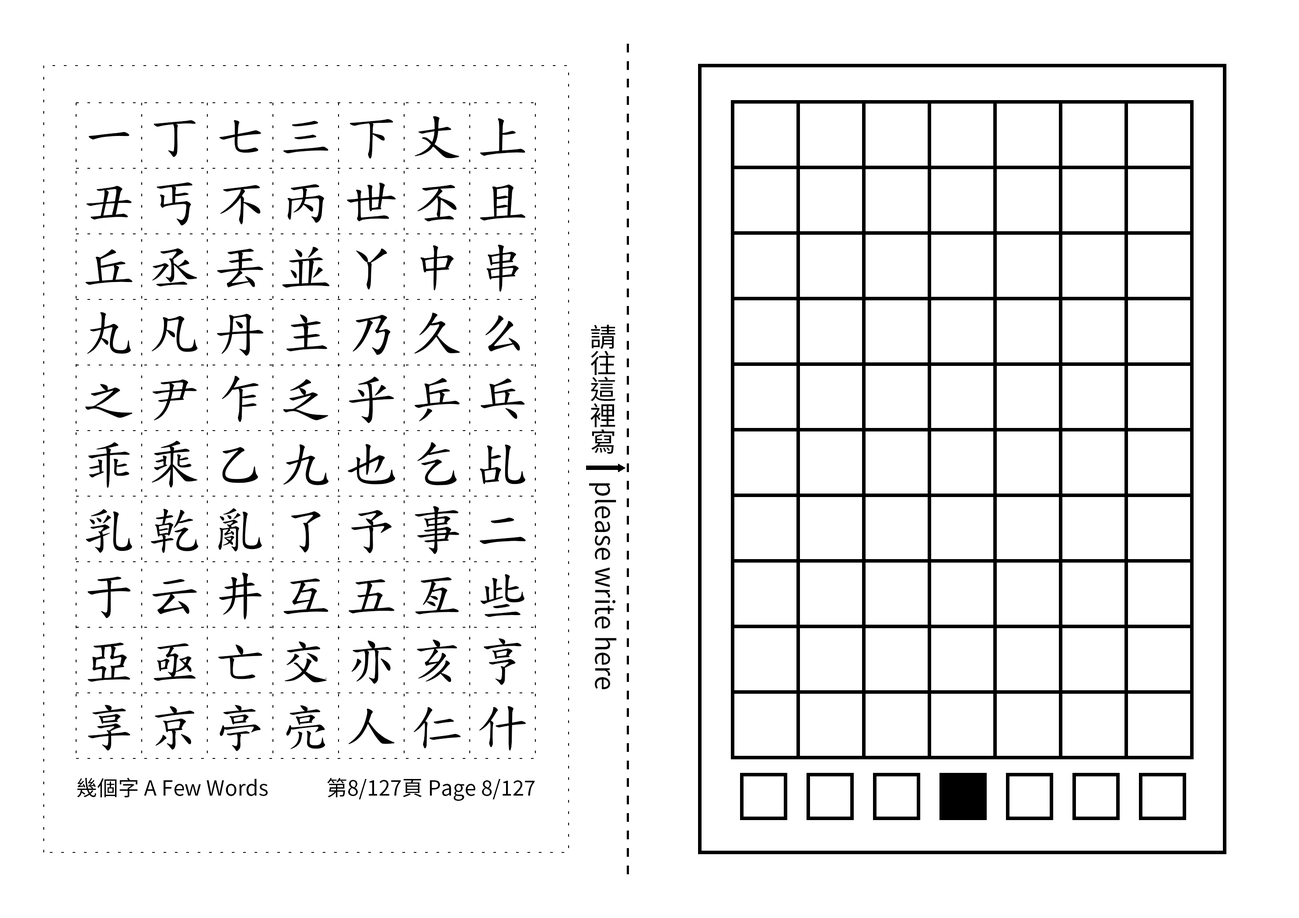
<style>
.page{position:relative;width:1299px;height:918px;background:#ffffff}
.page>*{position:absolute;margin:0}
.t1{font:52.5px/65.6px "TW-Kai-98_1";letter-spacing:0.25em;color:#000000}
.t2{font:26.2px "SourceHanSansTC-Regular";color:#000000}
.t3{font:21px "SourceHanSansTC-Regular";color:#000000}
</style>
<div class="page">
<p class="t1" style="left:85px;top:116px;width:441px;height:636px;text-align:center">一丁七三下丈上丑丐不丙世丕且丘丞丟並丫中串丸凡丹主乃久么之尹乍乏乎乒乓乖乘乙九也乞乩乳乾亂了予事二于云井互五亙些亞亟亡交亦亥亨享京亭亮人仁什</p>
<p class="t2" style="left:589px;top:324px;width:28px;height:366px;text-align:center">請往這裡寫　please write here</p>
<p class="t3" style="left:77px;top:778px;width:191px;height:20px">幾個字 A Few Words</p>
<p class="t3" style="left:327px;top:778px;width:208px;height:23px">第8/127頁 Page 8/127</p>
</div>
